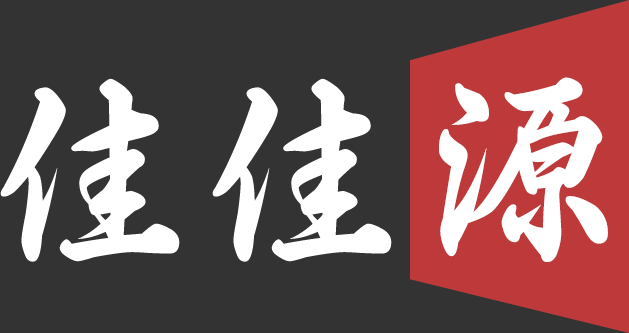
<style>
.page{position:relative;width:629px;height:333px;background:#333333}
.page>*{position:absolute;margin:0}
.t1{font:212px "SJxingkai-C-Regular";color:#ffffff}
</style>
<div class="page">
<p class="t1" style="left:0px;top:77px;width:608px;height:185px">佳佳源</p>
</div>
